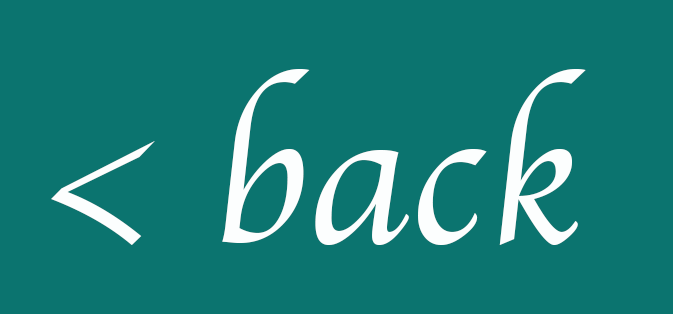
<style>
.page{position:relative;width:673px;height:314px;background:#0b746f}
.page>*{position:absolute;margin:0}
.t1{font:200px "Apple-Chancery";color:#fcfefe}
</style>
<div class="page">
<p class="t1" style="left:51px;top:69px;width:535px;height:176px">&lt; back</p>
</div>
